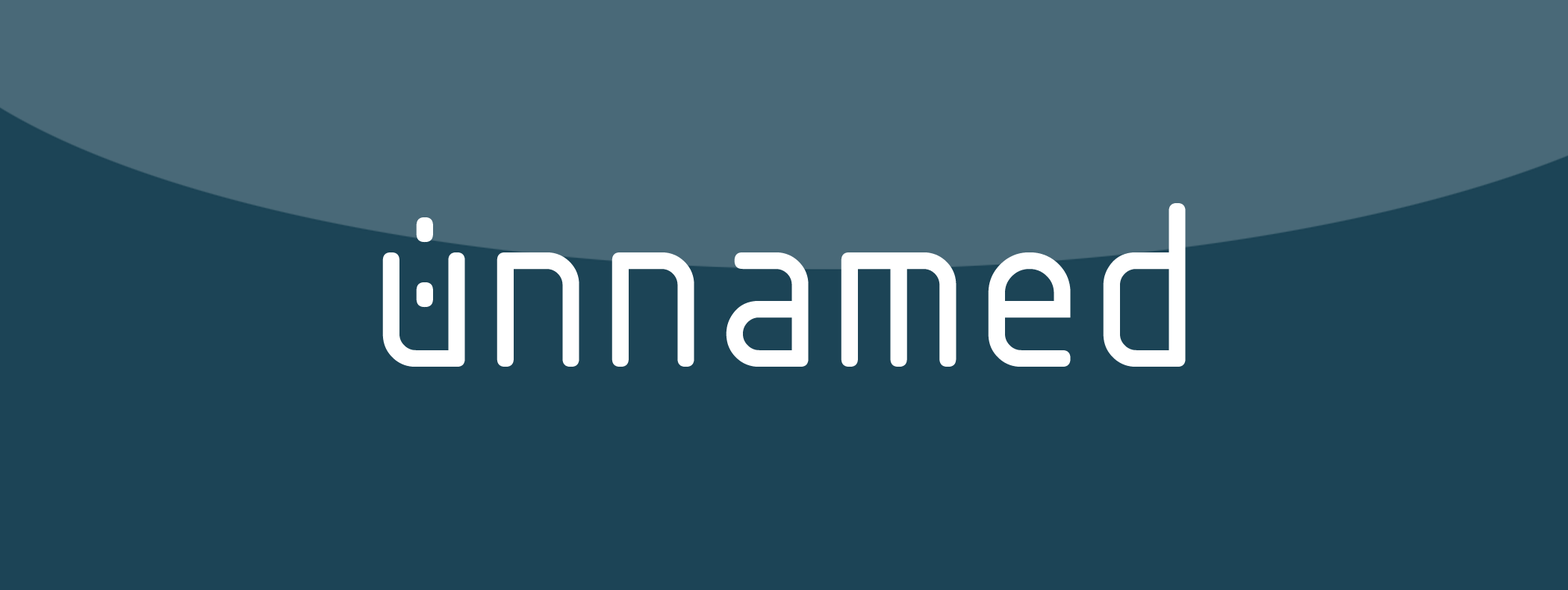
<style>
.page{position:relative;width:1568px;height:590px;background:#1c4456}
.page>*{position:absolute;margin:0}
.t1{font:253.9px "ISOCPEUR";color:#ffffff}
</style>
<div class="page">
<p class="t1" style="left:382px;top:203px;width:804px;height:164px">unnamed</p>
<p class="t1" style="left:416px;top:217px;width:17px;height:91px">:</p>
</div>
